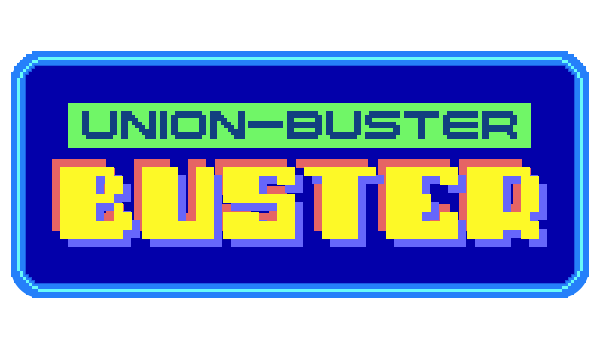
<style>
.page{position:relative;width:600px;height:350px;background:#ffffff}
.page>*{position:absolute;margin:0}
.t1{font:28px "04b20";letter-spacing:0.02em;color:#124080;text-transform:uppercase}
.t2{font:72px "Typo-pixel";letter-spacing:0.02em}
.t3{font:72px "Typo-pixel";letter-spacing:0.02em;color:#fdf927}
</style>
<div class="page">
<p class="t1" style="left:82px;top:111px;width:435px;height:28px">UNION-BUSTER</p>
<p class="t2" style="left:52px;top:159px;width:479px;height:72px">BUSTER</p>
<p class="t3" style="left:60px;top:167px;width:479px;height:72px">BUSTER</p>
</div>
